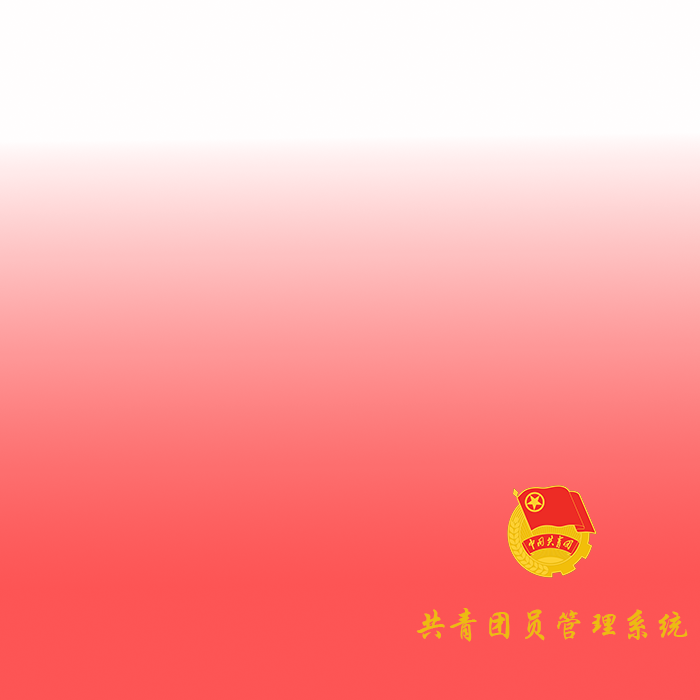
<style>
.page{position:relative;width:700px;height:700px}
.page>*{position:absolute;margin:0}
.t1{font:34.4px "STXingkai";color:#ecbb11}
</style>
<div class="page">
<p class="t1" style="left:416px;top:608px;width:272px;height:34px">共青团员管理系统</p>
</div>
